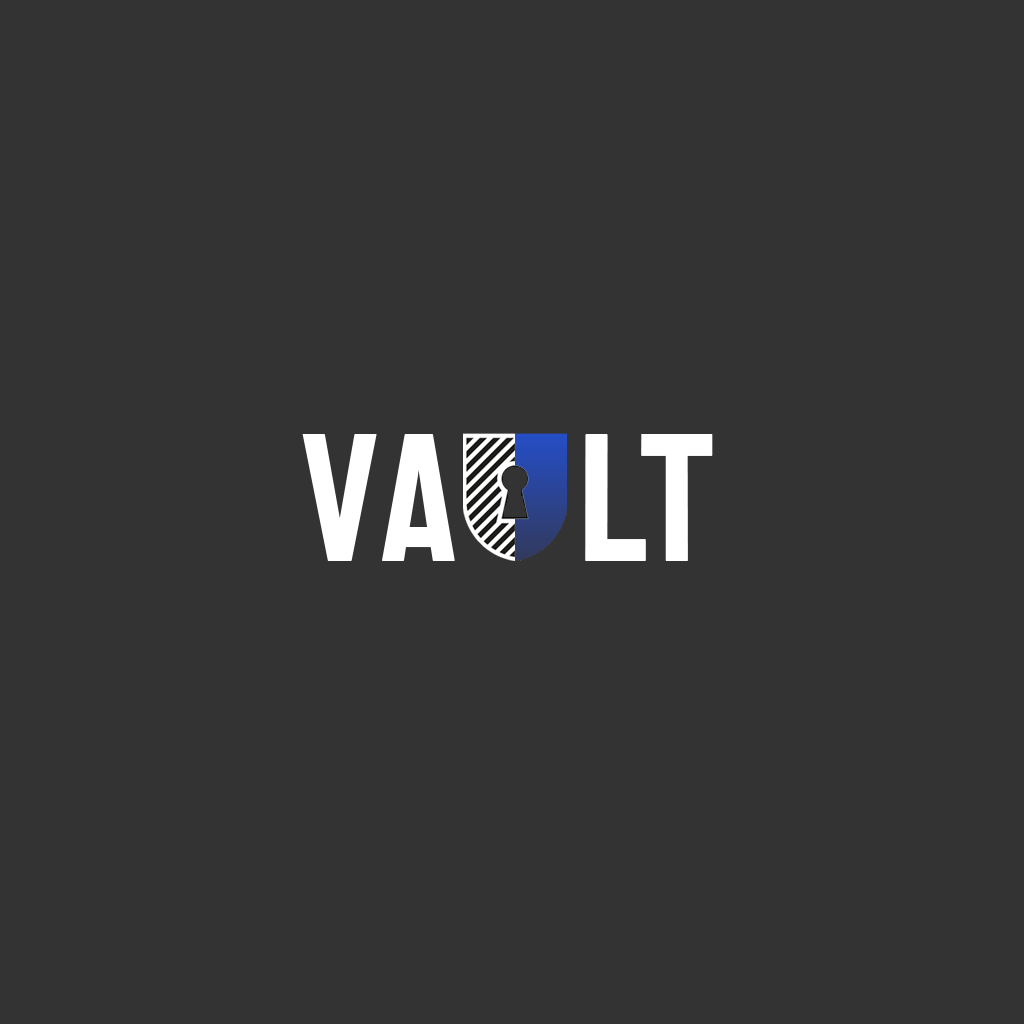
<style>
.page{position:relative;width:1024px;height:1024px;background:#333333}
.page>*{position:absolute;margin:0}
.t1{font:182.2px "Staatliches-Regular";letter-spacing:0.05em;color:#ffffff}
</style>
<div class="page">
<p class="t1" style="left:302px;top:434px;width:411px;height:127px">Va   lt</p>
</div>
